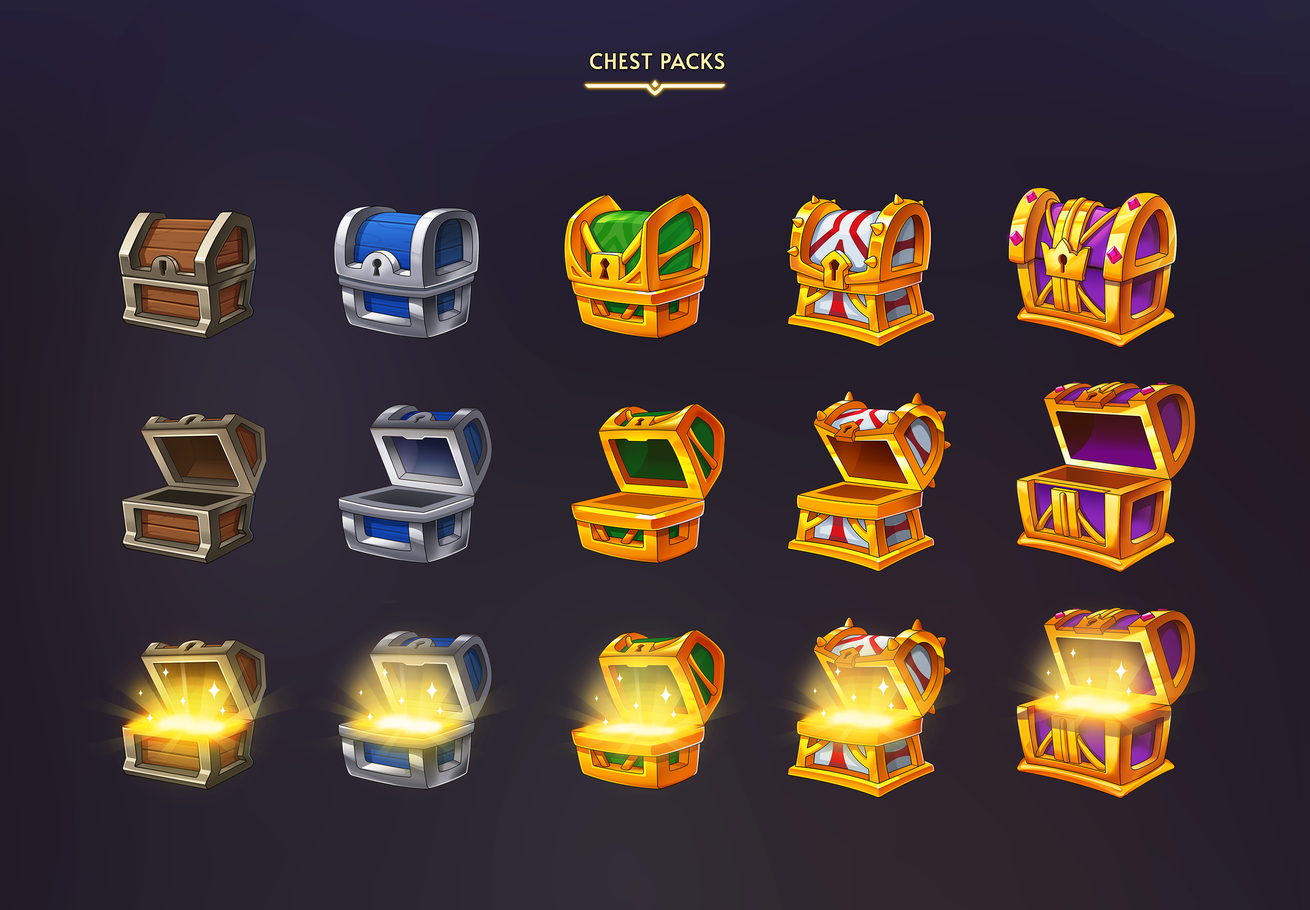
<style>
.page{position:relative;width:1310px;height:910px}
.page>*{position:absolute;margin:0}
.t1{font:21.3px "Alata-Regular";letter-spacing:0.02em;color:#f6e19c;text-transform:uppercase;font-weight:bold}
</style>
<div class="page">
<p class="t1" style="left:590px;top:53px;width:135px;height:16px">Chest Packs</p>
</div>
